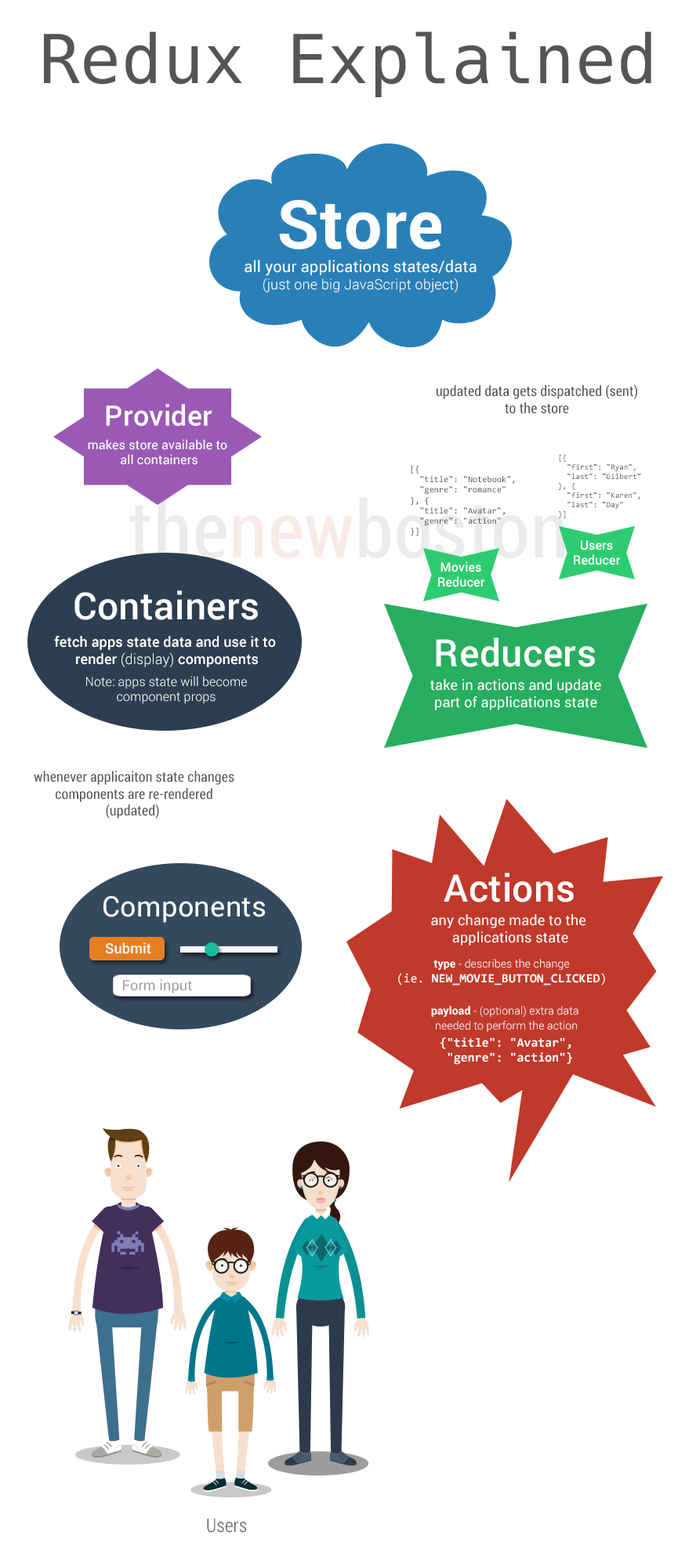
<style>
.page{position:relative;width:696px;height:1568px;background:#ffffff}
.page>*{position:absolute;margin:0}
.t1{font:67.4px "Hack-Regular";letter-spacing:0.01em;color:#555555}
.t2{font:67.4px "Roboto-Bold";letter-spacing:0.01em;color:#ffffff}
.t3{font:15.7px "Roboto-Regular";letter-spacing:0.01em;color:#ffffff}
.t4{font:14.1px "Roboto-Light";letter-spacing:0.01em;color:#ffffff}
.t5{font:14.1px "RobotoCondensed-Regular";letter-spacing:0.01em;color:#555555}
.t6{font:28.2px "Roboto-Medium";letter-spacing:0.01em;color:#ffffff}
.t7{font:12.5px "Roboto-Regular";letter-spacing:0.01em;color:#ffffff}
.t8{font:7.8px "Consolas";letter-spacing:0.01em;color:#555555}
.t9{font:8.6px "Consolas";letter-spacing:0.01em;color:#555555}
.t10{font:12.5px "Roboto-Medium";letter-spacing:0.01em;color:#ffffff}
.t11{font:37.6px "Roboto-Medium";letter-spacing:0.01em;color:#ffffff}
.t12{font:14.1px "Roboto-Medium";letter-spacing:0.01em;color:#ffffff}
.t13{font:12.5px "Roboto-Light";letter-spacing:0.01em;color:#ffffff}
.t14{font:14.1px "Roboto-Regular";letter-spacing:0.01em;color:#ffffff}
.t15{font:28.2px "Roboto-Regular";letter-spacing:0.01em;color:#ffffff}
.t16{font:12.5px/14.6px "Consolas-Bold";letter-spacing:0.01em;color:#ffffff}
.t17{font:11px/14.6px "Roboto-Bold";letter-spacing:0.01em;color:#ffffff}
.t18{font:11px/14.6px "Roboto-Light";letter-spacing:0.01em;color:#ffffff}
.t19{font:12.5px/14.6px "Consolas";letter-spacing:0.01em;color:#ffffff}
.t20{font:14.1px "Roboto-Regular";letter-spacing:0.01em;color:#999999}
.t21{font:12.5px "Consolas-Bold";letter-spacing:0.01em;color:#ffffff}
.t22{font:18.8px "RobotoCondensed-Light";letter-spacing:0.01em;color:#555555}
</style>
<div class="page">
<p class="t1" style="left:44px;top:31px;width:608px;height:66px">Redux Explained</p>
<p class="t2" style="left:279px;top:200px;width:162px;height:49px">Store</p>
<p class="t3" style="left:245px;top:260px;width:232px;height:32px;text-align:center">all your applications states/data<br><span class="t4">(just one big JavaScript object)</span></p>
<p class="t5" style="left:437px;top:384px;width:200px;height:30px;text-align:center">updated data gets dispatched (sent)<br>to the store</p>
<p class="t6" style="left:106px;top:404px;width:106px;height:22px">Provider</p>
<p class="t7" style="left:88px;top:439px;width:139px;height:26px;text-align:center">makes store available to <br>all containers</p>
<p class="t8" style="left:559px;top:455px;width:82px;height:63px">[{<br>  "first": "Ryan",<br>  "last": "Gilbert"<br>}, {<br>  "first": "Karen",<br>  "last": "Day"<br>}]</p>
<p class="t9" style="left:411px;top:466px;width:104px;height:70px">[{<br>  "title": "Notebook",<br>  "genre": "romance"<br>}, {<br>  "title": "Avatar",<br>  "genre": "action"<br>}]</p>
<p class="t10" style="left:574px;top:540px;width:47px;height:25px;text-align:center">Users<br>Reducer</p>
<p class="t10" style="left:438px;top:561px;width:47px;height:26px;text-align:center">Movies<br>Reducer</p>
<p class="t11" style="left:74px;top:590px;width:184px;height:30px">Containers</p>
<p class="t12" style="left:54px;top:636px;width:222px;height:31px;text-align:center">fetch apps state data and use it to <br>render <span class="t4">(display) </span>components</p>
<p class="t11" style="left:436px;top:637px;width:159px;height:30px">Reducers</p>
<p class="t13" style="left:86px;top:676px;width:161px;height:28px;text-align:center">Note: apps state will become<br>component props</p>
<p class="t14" style="left:430px;top:679px;width:171px;height:31px;text-align:center">take in actions and update<br>part of applications state</p>
<p class="t5" style="left:34px;top:771px;width:200px;height:47px;text-align:center">whenever applicaiton state changes<br> components are re-rendered <br>(updated)</p>
<p class="t11" style="left:444px;top:873px;width:130px;height:29px">Actions</p>
<p class="t15" style="left:103px;top:896px;width:162px;height:27px">Components</p>
<p class="t14" style="left:431px;top:914px;width:155px;height:32px;text-align:center">any change made to the <br>applications state</p>
<p class="t12" style="left:105px;top:942px;width:46px;height:12px">Submit</p>
<p class="t16" style="left:398px;top:959px;width:207px;height:26px;text-align:center"><span class="t17">type </span><span class="t18">- describes the change<br></span><span class="t19">(ie. </span>NEW_MOVIE_BUTTON_CLICKED<span class="t19">)</span></p>
<p class="t20" style="left:123px;top:979px;width:69px;height:14px">Form input</p>
<p class="t18" style="left:431px;top:1006px;width:148px;height:26px;text-align:center"><span class="t17">payload </span>- (optional) extra data <br>needed to perform the action</p>
<p class="t21" style="left:441px;top:1037px;width:131px;height:28px">{"title": "Avatar",<br> "genre": "action"}</p>
<p class="t22" style="left:207px;top:1519px;width:39px;height:14px">Users</p>
</div>
